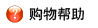
<style>
.page{position:relative;width:98px;height:28px;background:#ffffff}
.page>*{position:absolute;margin:0}
.t1{font:14px "-k-a-i-2";color:#ffffff}
.t2{font:14px "SimHei";color:#000000}
</style>
<div class="page">
<p class="t1" style="left:12px;top:8px;width:6px;height:11px">?</p>
<p class="t2" style="left:29px;top:7px;width:55px;height:14px">购物帮助</p>
</div>
